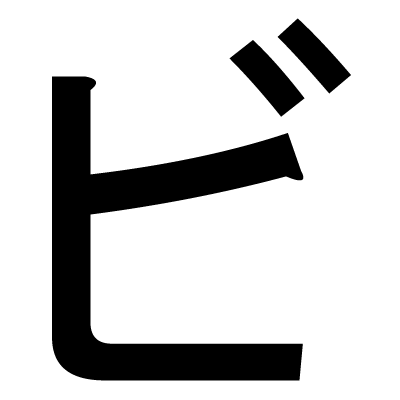
<style>
.page{position:relative;width:400px;height:400px;background:#ffffff}
.page>*{position:absolute;margin:0}
.t1{font:424.8px "MS-PGothic";color:#000000}
</style>
<div class="page">
<p class="t1" style="left:52px;top:18px;width:299px;height:363px">ビ</p>
</div>
